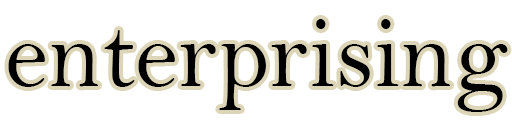
<style>
.page{position:relative;width:512px;height:128px;background:#ffffff}
.page>*{position:absolute;margin:0}
.t1{font:100px "BellMT";color:#000000}
</style>
<div class="page">
<p class="t1" style="left:8px;top:19px;width:500px;height:93px">enterprising</p>
</div>
